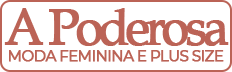
<style>
.page{position:relative;width:232px;height:72px;background:#ffffff}
.page>*{position:absolute;margin:0}
.t1{font:50px "BookAntiqua";letter-spacing:-0.1em;color:#bb6356;font-weight:bold}
.t2{font:15px "Montserrat-Regular";letter-spacing:-0.1em;color:#bb6356;font-weight:bold}
</style>
<div class="page">
<p class="t1" style="left:4px;top:8px;width:225px;height:38px">A Poderosa</p>
<p class="t2" style="left:9px;top:50px;width:215px;height:12px">MODA FEMININA E PLUS SIZE</p>
</div>
